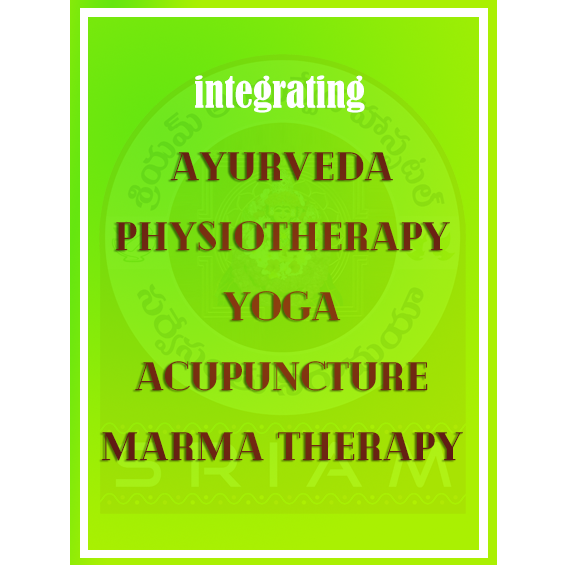
<style>
.page{position:relative;width:565px;height:565px;background:#ffffff}
.page>*{position:absolute;margin:0}
.t1{font:39.9px "BernardMT-Condensed";color:#ffffff}
.t2{font:40px "Cheque-Black";color:#712912}
</style>
<div class="page">
<p class="t1" style="left:195px;top:75px;width:170px;height:38px">integrating</p>
<p class="t2" style="left:101px;top:152px;width:362px;height:309px;text-align:center">Ayurveda<br>Physiotherapy<br>yoga<br>Acupuncture<br>marma therapy</p>
</div>
